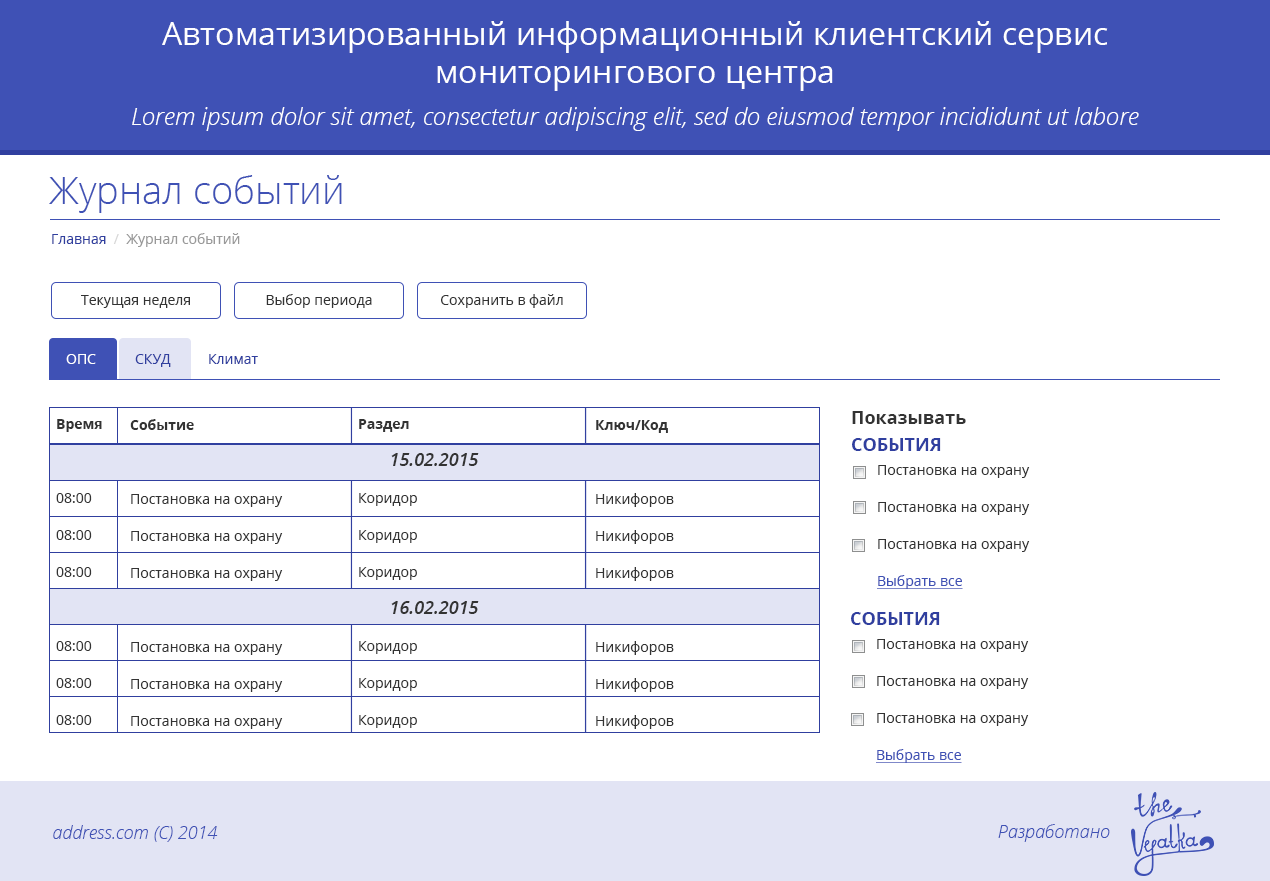
<style>
.page{position:relative;width:1270px;height:881px;background:#ffffff}
.page>*{position:absolute;margin:0}
.t1{font:32px "OpenSans";color:#ffffff}
.t2{font:24px "OpenSansLight-Italic";color:#ffffff}
.t3{font:38px "OpenSans-Light";color:#3f51b5}
.t4{font:14px "OpenSans";color:#999999}
.t5{font:14px "OpenSans";color:#303f9f}
.t6{font:14px "OpenSans";color:#d8d8d8}
.t7{font:14px "OpenSans";color:#333333}
.t8{font:14px "OpenSans";color:#ffffff}
.t9{font:18px "OpenSans-Bold";color:#333333}
.t10{font:14px/37px "OpenSans";color:#333333}
.t11{font:14px/37px "OpenSans-Bold";color:#333333}
.t12{font:18px/37px "OpenSans-SemiboldItalic";color:#333333}
.t13{font:18px "OpenSans-Bold";color:#303f9f;text-transform:uppercase}
.t14{font:14px/37px "OpenSans";color:#3f51b5;text-decoration:underline}
.t15{font:18px "OpenSansLight-Italic";color:#3f51b5}
</style>
<div class="page">
<p class="t1" style="left:162px;top:21px;width:946px;height:70px;text-align:center">Автоматизированный информационный клиентский сервис<br>мониторингового центра</p>
<p class="t2" style="left:132px;top:107px;width:1007px;height:24px">Lorem ipsum dolor sit amet, consectetur adipiscing elit, sed do eiusmod tempor incididunt ut labore</p>
<p class="t3" style="left:49px;top:175px;width:293px;height:38px">Журнал событий</p>
<p class="t4" style="left:52px;top:233px;width:188px;height:14px"><span class="t5">Главная  </span><span class="t6">/</span>  Журнал событий</p>
<p class="t7" style="left:266px;top:294px;width:106px;height:14px">Выбор периода</p>
<p class="t7" style="left:441px;top:294px;width:122px;height:14px">Сохранить в файл</p>
<p class="t7" style="left:81px;top:295px;width:109px;height:13px">Текущая неделя</p>
<p class="t8" style="left:66px;top:354px;width:30px;height:10px">ОПС</p>
<p class="t5" style="left:135px;top:354px;width:36px;height:13px">СКУД</p>
<p class="t5" style="left:209px;top:354px;width:49px;height:10px">Климат</p>
<p class="t9" style="left:852px;top:411px;width:114px;height:13px">Показывать</p>
<p class="t10" style="left:56px;top:419px;width:423px;height:306px"><span class="t11">Время<br>                      </span><span class="t12">15.02.2015<br></span>08:00<br>08:00<br>08:00<br>                      <span class="t12">16.02.2015<br></span>08:00<br>08:00<br>08:00</p>
<p class="t10" style="left:130px;top:419px;width:153px;height:310px"><span class="t11">Событие<br></span><br>Постановка на охрану<br>Постановка на охрану<br>Постановка на охрану<br><br>Постановка на охрану<br>Постановка на охрану<br>Постановка на охрану</p>
<p class="t10" style="left:359px;top:419px;width:58px;height:309px"><span class="t11">Раздел<br></span><br>Коридор<br>Коридор<br>Коридор<br><br>Коридор<br>Коридор<br>Коридор</p>
<p class="t10" style="left:596px;top:420px;width:78px;height:309px"><span class="t11">Ключ/Код<br></span><br>Никифоров<br>Никифоров<br>Никифоров<br><br>Никифоров<br>Никифоров<br>Никифоров</p>
<p class="t13" style="left:852px;top:438px;width:89px;height:13px">События</p>
<p class="t10" style="left:877px;top:465px;width:153px;height:124px">Постановка на охрану<br>Постановка на охрану<br>Постановка на охрану<br><span class="t14">Выбрать все</span></p>
<p class="t13" style="left:851px;top:612px;width:89px;height:13px">События</p>
<p class="t10" style="left:876px;top:639px;width:153px;height:124px">Постановка на охрану<br>Постановка на охрану<br>Постановка на охрану<br><span class="t14">Выбрать все</span></p>
<p class="t15" style="left:53px;top:825px;width:165px;height:17px">address.com (C) 2014</p>
<p class="t15" style="left:998px;top:824px;width:112px;height:18px">Разработано</p>
</div>
